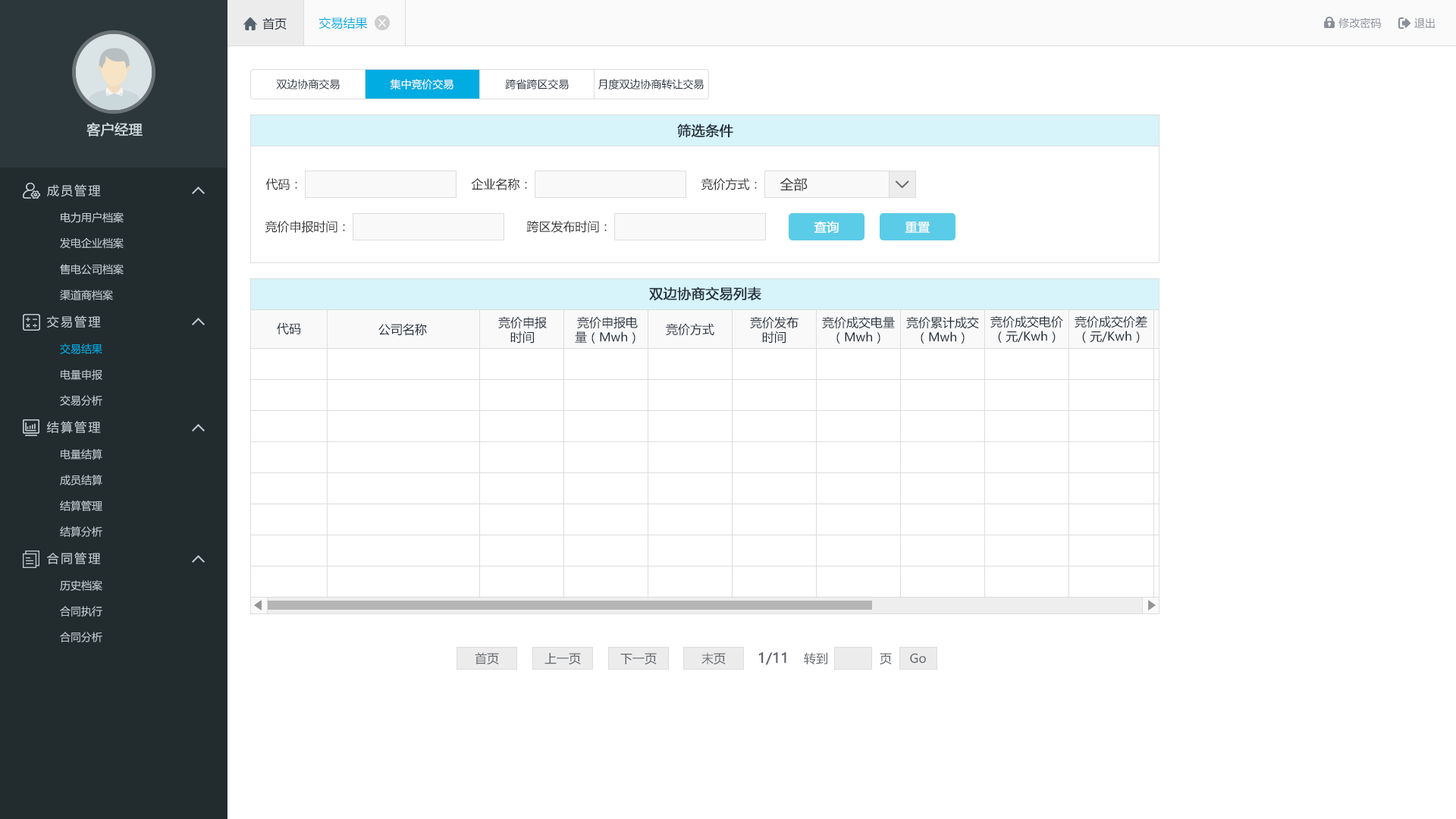
<style>
.page{position:relative;width:1456px;height:819px;background:#ffffff}
.page>*{position:absolute;margin:0}
.t1{font:12.1px "MicrosoftYaHei";color:#242e3b}
.t2{font:12.1px "MicrosoftYaHei";color:#00ace2}
.t3{font:10.6px "MicrosoftYaHei";color:#8a8f99}
.t4{font:10.6px "MicrosoftYaHei";color:#242e3b}
.t5{font:10.6px "MicrosoftYaHei";color:#ffffff}
.t6{font:13.6px "MicrosoftYaHei";color:#d1dce2;font-weight:bold}
.t7{font:13.6px "MicrosoftYaHei";color:#242e3b;font-weight:bold}
.t8{font:12.1px "MicrosoftYaHei";letter-spacing:0.14em;color:#c2cdd2}
.t9{font:12.1px "MicrosoftYaHei";color:#333333}
.t10{font:13.6px "MicrosoftYaHei";color:#333333}
.t11{font:10.6px "MicrosoftYaHei";color:#c2cdd2}
.t12{font:12.1px "MicrosoftYaHei";color:#ffffff;font-weight:bold}
.t13{font:10.6px "MicrosoftYaHei";color:#00ace2}
.t14{font:12.1px "MicrosoftYaHei";color:#61656b}
.t15{font:13.6px "MicrosoftYaHei";color:#61656b;font-weight:bold}
</style>
<div class="page">
<p class="t1" style="left:262px;top:17px;width:25px;height:13px">首页</p>
<p class="t2" style="left:318px;top:17px;width:50px;height:13px">交易结果</p>
<p class="t3" style="left:1338px;top:17px;width:43px;height:12px">修改密码</p>
<p class="t3" style="left:1414px;top:17px;width:21px;height:11px">退出</p>
<p class="t4" style="left:276px;top:79px;width:64px;height:10px">双边协商交易</p>
<p class="t5" style="left:390px;top:79px;width:63px;height:10px">集中竞价交易</p>
<p class="t4" style="left:505px;top:79px;width:64px;height:10px">跨省跨区交易</p>
<p class="t4" style="left:598px;top:79px;width:106px;height:10px">月度双边协商转让交易</p>
<p class="t6" style="left:86px;top:122px;width:57px;height:14px">客户经理</p>
<p class="t7" style="left:677px;top:124px;width:56px;height:14px">筛选条件</p>
<p class="t8" style="left:47px;top:184px;width:54px;height:13px">成员管理</p>
<p class="t9" style="left:265px;top:178px;width:32px;height:12px">代码：</p>
<p class="t9" style="left:471px;top:178px;width:56px;height:12px">企业名称：</p>
<p class="t9" style="left:701px;top:178px;width:56px;height:12px">竞价方式：</p>
<p class="t10" style="left:780px;top:177px;width:28px;height:14px">全部</p>
<p class="t11" style="left:61px;top:212px;width:63px;height:11px">电力用户档案</p>
<p class="t9" style="left:265px;top:221px;width:80px;height:12px">竞价申报时间：</p>
<p class="t9" style="left:526px;top:221px;width:81px;height:12px">跨区发布时间：</p>
<p class="t12" style="left:814px;top:221px;width:25px;height:12px">查询</p>
<p class="t12" style="left:905px;top:221px;width:25px;height:12px">重置</p>
<p class="t11" style="left:60px;top:237px;width:64px;height:12px">发电企业档案</p>
<p class="t11" style="left:60px;top:264px;width:64px;height:11px">售电公司档案</p>
<p class="t11" style="left:60px;top:290px;width:53px;height:10px">渠道商档案</p>
<p class="t7" style="left:649px;top:287px;width:112px;height:14px">双边协商交易列表</p>
<p class="t8" style="left:47px;top:315px;width:54px;height:13px">交易管理</p>
<p class="t1" style="left:498px;top:316px;width:49px;height:28px;text-align:center">竞价申报<br>时间</p>
<p class="t1" style="left:575px;top:316px;width:63px;height:28px;text-align:center">竞价申报电<br>量（Mwh）</p>
<p class="t1" style="left:750px;top:316px;width:49px;height:28px;text-align:center">竞价发布<br>时间</p>
<p class="t1" style="left:822px;top:316px;width:73px;height:28px;text-align:center">竞价成交电量<br>（Mwh）</p>
<p class="t1" style="left:906px;top:316px;width:73px;height:28px;text-align:center">竞价累计成交<br>（Mwh）</p>
<p class="t1" style="left:990px;top:315px;width:73px;height:28px;text-align:center">竞价成交电价<br>（元/Kwh）</p>
<p class="t1" style="left:1075px;top:315px;width:72px;height:28px;text-align:center">竞价成交价差<br>（元/Kwh）</p>
<p class="t1" style="left:277px;top:322px;width:24px;height:12px">代码</p>
<p class="t1" style="left:378px;top:323px;width:49px;height:13px">公司名称</p>
<p class="t1" style="left:666px;top:323px;width:48px;height:13px">竞价方式</p>
<p class="t13" style="left:60px;top:344px;width:42px;height:10px">交易结果</p>
<p class="t11" style="left:61px;top:369px;width:41px;height:11px">电量申报</p>
<p class="t11" style="left:60px;top:395px;width:42px;height:11px">交易分析</p>
<p class="t8" style="left:47px;top:421px;width:54px;height:13px">结算管理</p>
<p class="t11" style="left:61px;top:449px;width:41px;height:11px">电量结算</p>
<p class="t11" style="left:60px;top:475px;width:42px;height:10px">成员结算</p>
<p class="t11" style="left:60px;top:500px;width:42px;height:11px">结算管理</p>
<p class="t11" style="left:60px;top:526px;width:42px;height:11px">结算分析</p>
<p class="t8" style="left:47px;top:552px;width:54px;height:12px">合同管理</p>
<p class="t11" style="left:60px;top:580px;width:42px;height:11px">历史档案</p>
<p class="t11" style="left:60px;top:606px;width:42px;height:11px">合同执行</p>
<p class="t11" style="left:60px;top:632px;width:42px;height:10px">合同分析</p>
<p class="t14" style="left:475px;top:652px;width:24px;height:13px">首页</p>
<p class="t14" style="left:544px;top:653px;width:37px;height:12px">上一页</p>
<p class="t14" style="left:620px;top:653px;width:37px;height:12px">下一页</p>
<p class="t14" style="left:701px;top:652px;width:25px;height:13px">末页</p>
<p class="t15" style="left:758px;top:652px;width:28px;height:13px">1/11</p>
<p class="t14" style="left:804px;top:652px;width:23px;height:12px">转到</p>
<p class="t14" style="left:880px;top:653px;width:12px;height:12px">页</p>
<p class="t14" style="left:910px;top:653px;width:16px;height:11px">Go</p>
</div>
